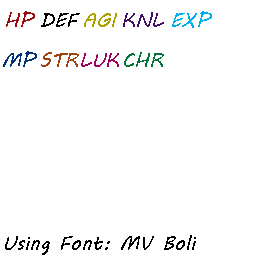
<style>
.page{position:relative;width:256px;height:256px;background:#ffffff}
.page>*{position:absolute;margin:0}
.t1{font:20px "MVBoli";color:#9e0b0f}
.t2{font:20px "MVBoli";color:#000000}
.t3{font:20px "MVBoli";color:#aba000}
.t4{font:20px "MVBoli";color:#440e62}
.t5{font:20px "MVBoli";color:#00aeef}
.t6{font:20px "MVBoli";color:#003471}
.t7{font:20px "MVBoli";color:#a0410d}
.t8{font:20px "MVBoli";color:#9e005d}
.t9{font:20px "MVBoli";color:#007236}
</style>
<div class="page">
<p class="t1" style="left:6px;top:11px;width:29px;height:16px">HP</p>
<p class="t2" style="left:41px;top:13px;width:39px;height:14px">DEF</p>
<p class="t3" style="left:84px;top:13px;width:33px;height:14px">AGI</p>
<p class="t4" style="left:123px;top:12px;width:41px;height:15px">KNL</p>
<p class="t5" style="left:172px;top:11px;width:40px;height:17px">EXP</p>
<p class="t6" style="left:3px;top:51px;width:34px;height:16px">MP</p>
<p class="t7" style="left:41px;top:52px;width:38px;height:15px">STR</p>
<p class="t8" style="left:81px;top:53px;width:38px;height:14px">LUK</p>
<p class="t9" style="left:124px;top:52px;width:40px;height:15px">CHR</p>
<p class="t2" style="left:5px;top:235px;width:191px;height:20px">Using Font: MV Boli</p>
</div>
